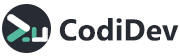
<style>
.page{position:relative;width:180px;height:56px;background:#ffffff}
.page>*{position:absolute;margin:0}
.t1{font:30.2px "SegoeUI-Bold";color:#272b33}
</style>
<div class="page">
<p class="t1" style="left:59px;top:18px;width:120px;height:23px">CodiDev</p>
</div>
